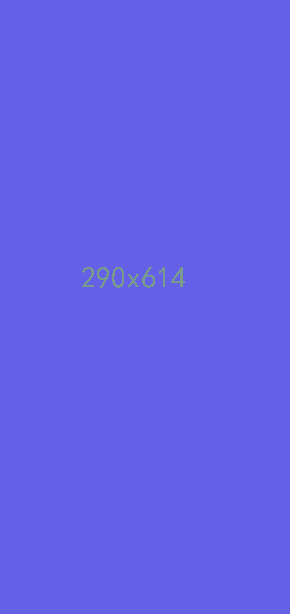
<style>
.page{position:relative;width:290px;height:614px;background:#6461e7}
.page>*{position:absolute;margin:0}
.t1{font:30px "SimHei";color:#789b8d}
</style>
<div class="page">
<p class="t1" style="left:82px;top:267px;width:103px;height:21px">290x614</p>
</div>
